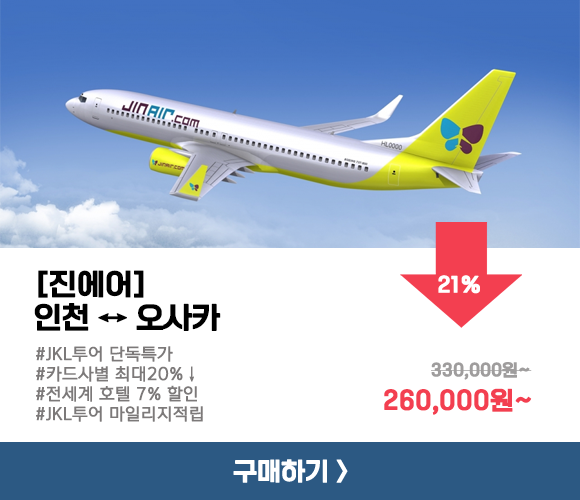
<style>
.page{position:relative;width:580px;height:500px;background:#ffffff}
.page>*{position:absolute;margin:0}
.t1{font:29.2px/33.3px "ONEMobileTitleOTFRegular";letter-spacing:-0.01em;color:#000000;font-weight:bold}
.t2{font:20.8px "ONEMobileTitleOTFRegular";letter-spacing:-0.01em;color:#ffffff;font-weight:bold}
.t3{font:16.7px "ONEMobileOTFRegular";letter-spacing:-0.01em;color:#7c7979;font-weight:bold}
.t4{font:16.7px "ONEMobileTitleOTFRegular";letter-spacing:-0.01em;color:#9f9d9d;font-weight:bold}
.t5{font:25px "ONEMobileTitleOTFRegular";letter-spacing:-0.01em;color:#f33f50;font-weight:bold}
</style>
<div class="page">
<p class="t1" style="left:34px;top:270px;width:187px;height:61px">[진에어]<br>인천 ↔ 오사카</p>
<p class="t2" style="left:438px;top:275px;width:42px;height:19px">21%</p>
<p class="t3" style="left:36px;top:346px;width:167px;height:76px">#JKL투어 단독특가<br>#카드사별 최대20%↓<br>#전세계 호텔 7% 할인<br>#JKL투어 마일리지적립</p>
<p class="t4" style="left:431px;top:362px;width:101px;height:18px">330,000원~</p>
<p class="t5" style="left:384px;top:388px;width:148px;height:27px">260,000원~</p>
</div>
